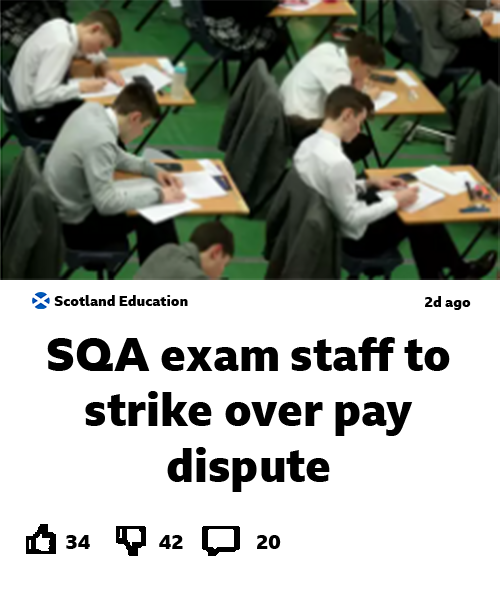
<style>
.page{position:relative;width:500px;height:600px;background:#ffffff}
.page>*{position:absolute;margin:0}
.t1{font:14.3px "BBCReithSans-XBold";color:#000000}
.t2{font:46px "BBCReithSans-XBold";color:#000000}
.t3{font:20px "BBCReithSans-XBold";color:#000000}
</style>
<div class="page">
<p class="t1" style="left:54px;top:295px;width:134px;height:11px">Scotland Education</p>
<p class="t1" style="left:425px;top:296px;width:46px;height:14px">2d ago</p>
<p class="t2" style="left:47px;top:337px;width:403px;height:155px;text-align:center">SQA exam staff to strike over pay dispute</p>
<p class="t3" style="left:66px;top:535px;width:24px;height:14px">34</p>
<p class="t3" style="left:159px;top:535px;width:24px;height:14px">42</p>
<p class="t3" style="left:257px;top:535px;width:24px;height:14px">20</p>
</div>
